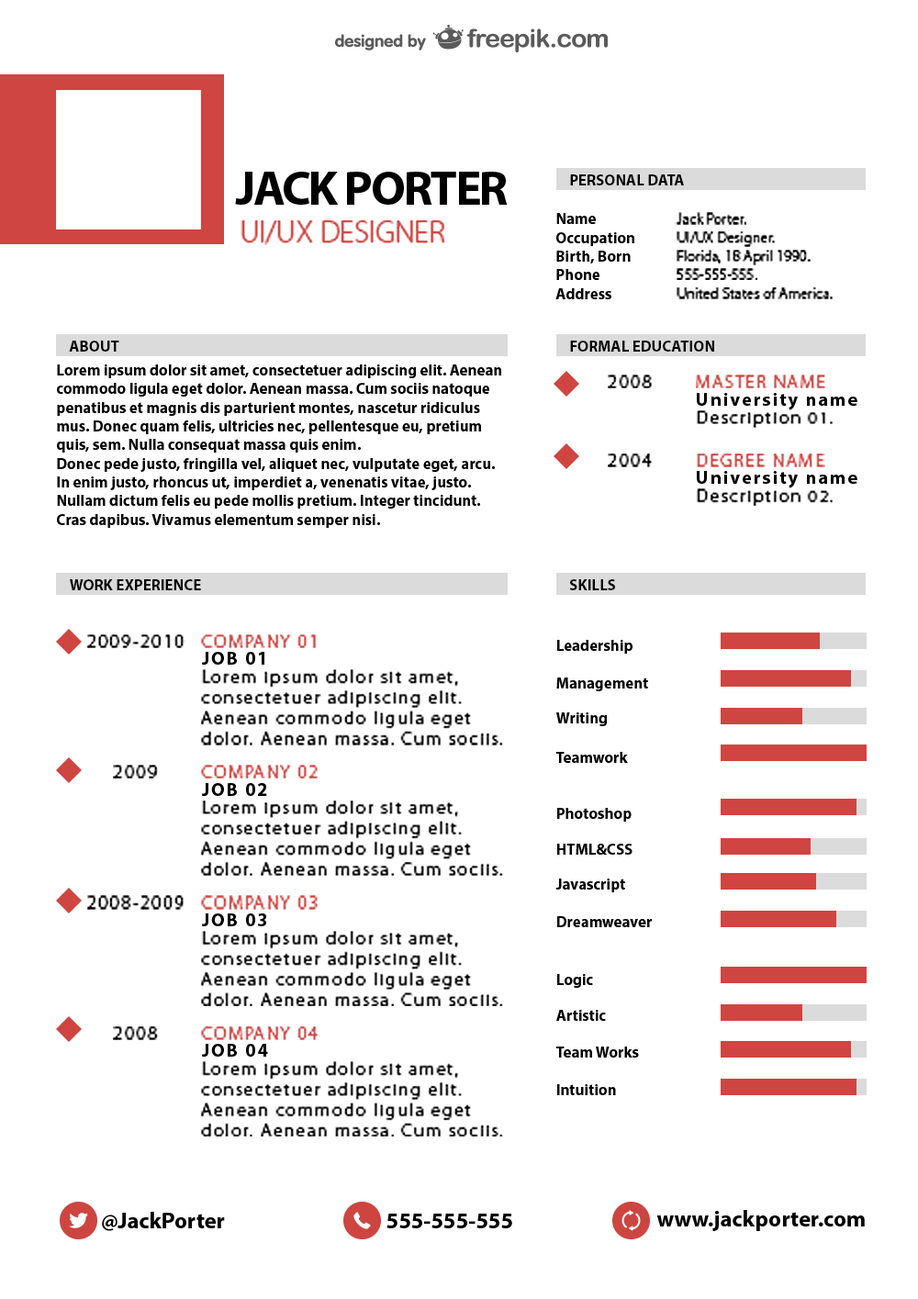
<style>
.page{position:relative;width:918px;height:1299px;background:#ffffff}
.page>*{position:absolute;margin:0}
.t1{font:48.1px "MyriadPro-Bold";letter-spacing:-0.04em;color:#000000}
.t2{font:15.6px "MyriadPro-Bold";color:#000000}
.t3{font:31.1px "MyriadPro-Light";color:#cf4541}
.t4{font:15.6px "MyriadPro-Light";color:#000000}
.t5{font:19.4px "MyriadPro-Light";letter-spacing:0.1em;color:#000000}
.t6{font:18.6px "MyriadPro-Light";letter-spacing:0.1em;color:#cf4541}
.t7{font:18.6px "MyriadPro-Bold";letter-spacing:0.1em;color:#000000}
.t8{font:17.4px "MyriadPro-Light";letter-spacing:0.1em;color:#000000;scale:1.07 1}
.t9{font:18.6px "MyriadPro-Light";letter-spacing:0.1em;color:#cf4542}
.t10{font:22.3px "MyriadPro-Bold";color:#000000}
</style>
<div class="page">
<p class="t1" style="left:235px;top:172px;width:273px;height:33px">JACK PORTER</p>
<p class="t2" style="left:570px;top:174px;width:114px;height:11px">PERSONAL DATA</p>
<p class="t3" style="left:241px;top:220px;width:205px;height:25px">UI/UX DESIGNER</p>
<p class="t2" style="left:556px;top:213px;width:40px;height:11px">Name</p>
<p class="t4" style="left:675px;top:212px;width:71px;height:13px">Jack Porter.</p>
<p class="t2" style="left:556px;top:232px;width:78px;height:14px">Occupation</p>
<p class="t4" style="left:677px;top:231px;width:100px;height:16px">UI/UX Designer.</p>
<p class="t2" style="left:556px;top:251px;width:75px;height:12px">Birth, Born</p>
<p class="t4" style="left:677px;top:250px;width:134px;height:15px">Florida, 18 April 1990.</p>
<p class="t2" style="left:556px;top:269px;width:43px;height:11px">Phone</p>
<p class="t4" style="left:677px;top:268px;width:80px;height:12px">555-555-555.</p>
<p class="t2" style="left:555px;top:288px;width:56px;height:11px">Address</p>
<p class="t4" style="left:677px;top:287px;width:157px;height:12px">United States of America.</p>
<p class="t2" style="left:69px;top:341px;width:50px;height:11px">ABOUT</p>
<p class="t2" style="left:570px;top:341px;width:144px;height:11px">FORMAL EDUCATION</p>
<p class="t2" style="left:57px;top:364px;width:444px;height:164px">Lorem ipsum dolor sit amet, consectetuer adipiscing elit. Aenean commodo ligula eget dolor. Aenean massa. Cum sociis natoque penatibus et magnis dis parturient montes, nascetur ridiculus mus. Donec quam felis, ultricies nec, pellentesque eu, pretium quis, sem. Nulla consequat massa quis enim. <br>Donec pede justo, fringilla vel, aliquet nec, vulputate eget, arcu. In enim justo, rhoncus ut, imperdiet a, venenatis vitae, justo. Nullam dictum felis eu pede mollis pretium. Integer tincidunt. Cras dapibus. Vivamus elementum semper nisi.</p>
<p class="t5" style="left:608px;top:375px;width:45px;height:13px">2008</p>
<p class="t6" style="left:696px;top:375px;width:131px;height:13px">MASTER NAME</p>
<p class="t7" style="left:697px;top:393px;width:160px;height:17px">University name</p>
<p class="t8" style="left:696px;top:410px;width:138px;height:18px">Description 01.</p>
<p class="t5" style="left:608px;top:453px;width:45px;height:14px">2004</p>
<p class="t9" style="left:696px;top:453px;width:129px;height:14px">DEGREE NAME</p>
<p class="t7" style="left:697px;top:471px;width:160px;height:17px">University name</p>
<p class="t8" style="left:696px;top:488px;width:138px;height:18px">Description 02.</p>
<p class="t2" style="left:70px;top:579px;width:131px;height:11px">WORK EXPERIENCE</p>
<p class="t2" style="left:569px;top:579px;width:46px;height:11px">SKILLS</p>
<p class="t5" style="left:87px;top:634px;width:98px;height:14px">2009-2010</p>
<p class="t6" style="left:201px;top:634px;width:115px;height:14px">COMPANY 01</p>
<p class="t2" style="left:557px;top:640px;width:75px;height:14px">Leadership</p>
<p class="t7" style="left:202px;top:652px;width:62px;height:13px">JOB 01</p>
<p class="t8" style="left:201px;top:669px;width:302px;height:76px">Lorem ipsum dolor sit amet, consectetuer adipiscing elit. Aenean commodo ligula eget dolor. Aenean massa. Cum sociis.</p>
<p class="t2" style="left:556px;top:677px;width:92px;height:14px">Management</p>
<p class="t2" style="left:556px;top:712px;width:51px;height:14px">Writing</p>
<p class="t2" style="left:556px;top:752px;width:72px;height:11px">Teamwork</p>
<p class="t5" style="left:113px;top:765px;width:45px;height:13px">2009</p>
<p class="t9" style="left:201px;top:765px;width:117px;height:13px">COMPANY 02</p>
<p class="t7" style="left:202px;top:783px;width:65px;height:13px">JOB 02</p>
<p class="t8" style="left:201px;top:800px;width:302px;height:76px">Lorem ipsum dolor sit amet, consectetuer adipiscing elit. Aenean commodo ligula eget dolor. Aenean massa. Cum sociis.</p>
<p class="t2" style="left:557px;top:808px;width:75px;height:14px">Photoshop</p>
<p class="t2" style="left:557px;top:844px;width:75px;height:11px">HTML&amp;CSS</p>
<p class="t2" style="left:555px;top:879px;width:70px;height:13px">Javascript</p>
<p class="t5" style="left:87px;top:895px;width:98px;height:15px">2008-2009</p>
<p class="t9" style="left:201px;top:895px;width:117px;height:15px">COMPANY 03</p>
<p class="t7" style="left:202px;top:913px;width:64px;height:13px">JOB 03</p>
<p class="t2" style="left:557px;top:916px;width:95px;height:11px">Dreamweaver</p>
<p class="t8" style="left:201px;top:931px;width:302px;height:75px">Lorem ipsum dolor sit amet, consectetuer adipiscing elit. Aenean commodo ligula eget dolor. Aenean massa. Cum sociis.</p>
<p class="t2" style="left:557px;top:974px;width:36px;height:14px">Logic</p>
<p class="t2" style="left:556px;top:1010px;width:50px;height:11px">Artistic</p>
<p class="t5" style="left:113px;top:1026px;width:45px;height:14px">2008</p>
<p class="t6" style="left:201px;top:1026px;width:118px;height:14px">COMPANY 04</p>
<p class="t7" style="left:202px;top:1044px;width:66px;height:13px">JOB 04</p>
<p class="t2" style="left:556px;top:1047px;width:83px;height:11px">Team Works</p>
<p class="t8" style="left:201px;top:1061px;width:302px;height:75px">Lorem ipsum dolor sit amet, consectetuer adipiscing elit. Aenean commodo ligula eget dolor. Aenean massa. Cum sociis.</p>
<p class="t2" style="left:557px;top:1084px;width:59px;height:11px">Intuition</p>
<p class="t10" style="left:102px;top:1212px;width:123px;height:19px">@JackPorter</p>
<p class="t10" style="left:386px;top:1214px;width:126px;height:14px">555-555-555</p>
<p class="t10" style="left:656px;top:1210px;width:209px;height:21px">www.jackporter.com</p>
</div>
